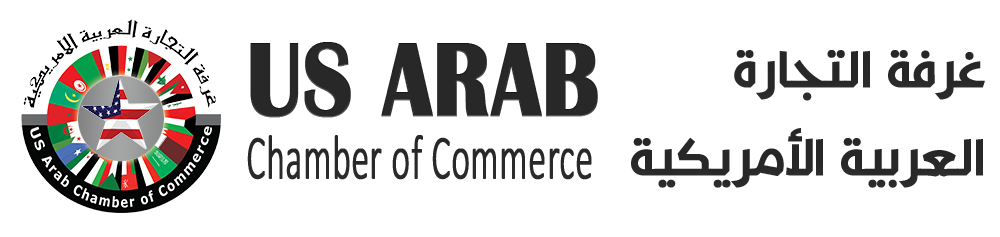
<style>
.page{position:relative;width:1000px;height:237px;background:#ffffff}
.page>*{position:absolute;margin:0}
.t1{font:108px "BritannicBold";color:#292828;font-weight:bold;scale:0.82 1}
.t2{font:51px/88px "KufyanArabic-Black";color:#292828;font-weight:bold}
.t3{font:63px "Calibri-Light";color:#292828;font-weight:bold;scale:0.56 1}
</style>
<div class="page">
<p class="t1" style="left:250px;top:42px;width:348px;height:76px">US ARAB</p>
<p class="t2" style="left:631px;top:50px;width:354px;height:138px;text-align:right">غرفة التجارة<br>العربية الأمريكية</p>
<p class="t3" style="left:247px;top:135px;width:345px;height:45px">Chamber of Commerce</p>
</div>
